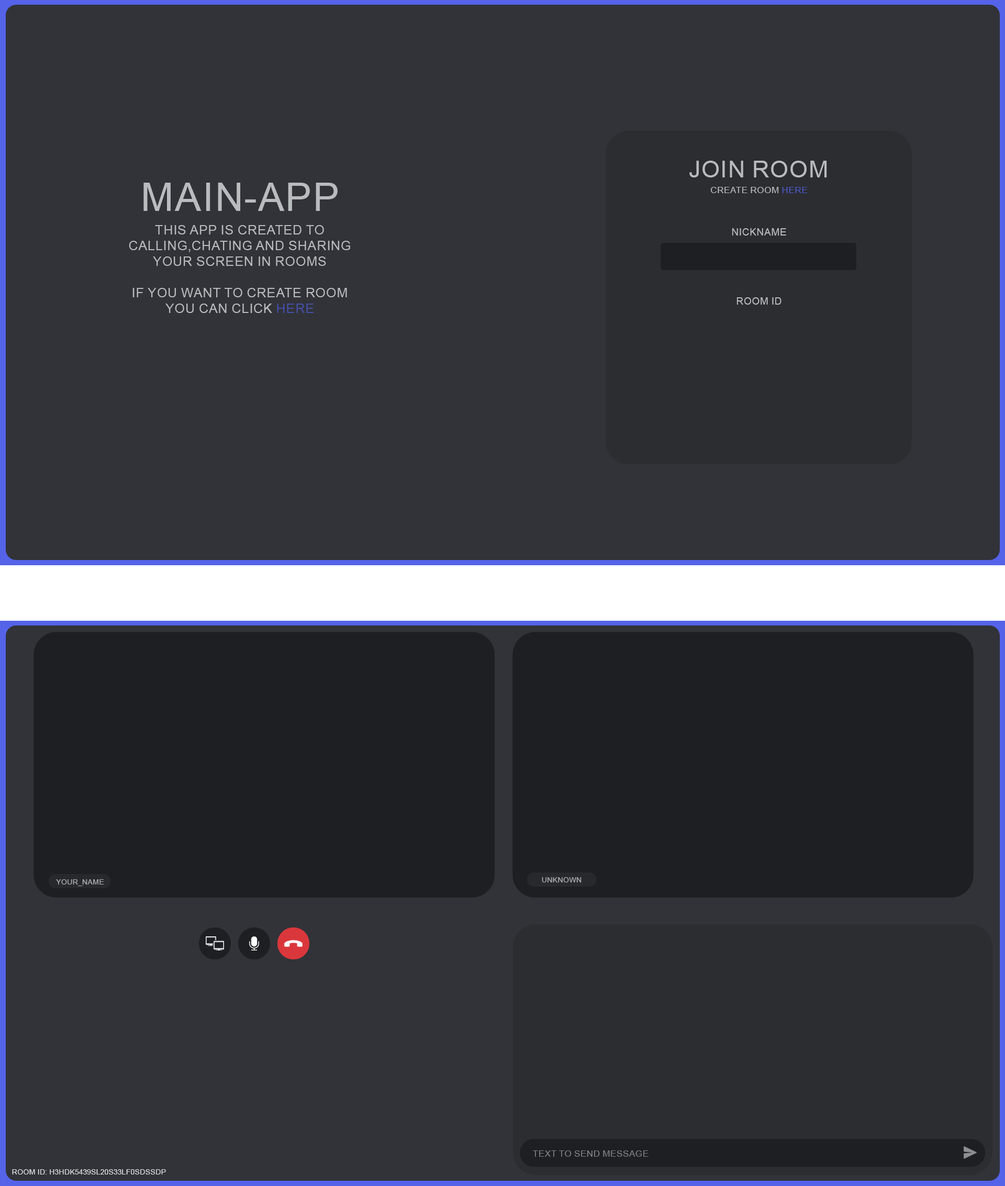
<style>
.page{position:relative;width:1005px;height:1186px;background:#313338}
.page>*{position:absolute;margin:0}
.t1{font:23.6px "ArialMT";color:#b8bbbe;text-transform:uppercase}
.t2{font:39.3px "ArialMT";color:#b9bcbf;text-transform:uppercase}
.t3{font:8.9px "ArialMT";text-transform:uppercase}
.t4{font:13.1px "ArialMT";color:#b9bcbf;text-transform:uppercase}
.t5{font:9.9px "ArialMT";color:#b8bbbe;text-transform:uppercase}
.t6{font:7.3px "ArialMT";color:#acaeb1;text-transform:uppercase}
.t7{font:8.9px "ArialMT";color:#7d7f82;text-transform:uppercase}
.t8{font:7.3px "ArialMT";color:#dbdee1;text-transform:uppercase}
</style>
<div class="page">
<p class="t1" style="left:689px;top:161px;width:138px;height:16px">JOIN ROOM</p>
<p class="t2" style="left:143px;top:183px;width:195px;height:28px">MAIN-APP</p>
<p class="t3" style="left:711px;top:187px;width:97px;height:6px">CREATE ROOM HERE</p>
<p class="t4" style="left:129px;top:225px;width:221px;height:88px;text-align:center">THIS APP IS CREATED TO CALLING,CHATING AND SHARING YOUR SCREEN IN ROOMS<br><br>IF YOU wANT TO CREATE ROOM<br>YOU CAN CLICK HERE</p>
<p class="t5" style="left:732px;top:228px;width:54px;height:8px">NICKNAME</p>
<p class="t5" style="left:737px;top:297px;width:45px;height:8px">ROOM ID</p>
<p class="t6" style="left:56px;top:880px;width:48px;height:6px">YOUR_NAME</p>
<p class="t6" style="left:542px;top:877px;width:40px;height:6px">UNKNOWN</p>
<p class="t7" style="left:533px;top:1151px;width:116px;height:6px">TEXT TO SEND MESSAGE</p>
<p class="t8" style="left:12px;top:1170px;width:154px;height:5px">ROOM ID: H3HDK5439SL20S33LF0SDSSDP</p>
</div>
